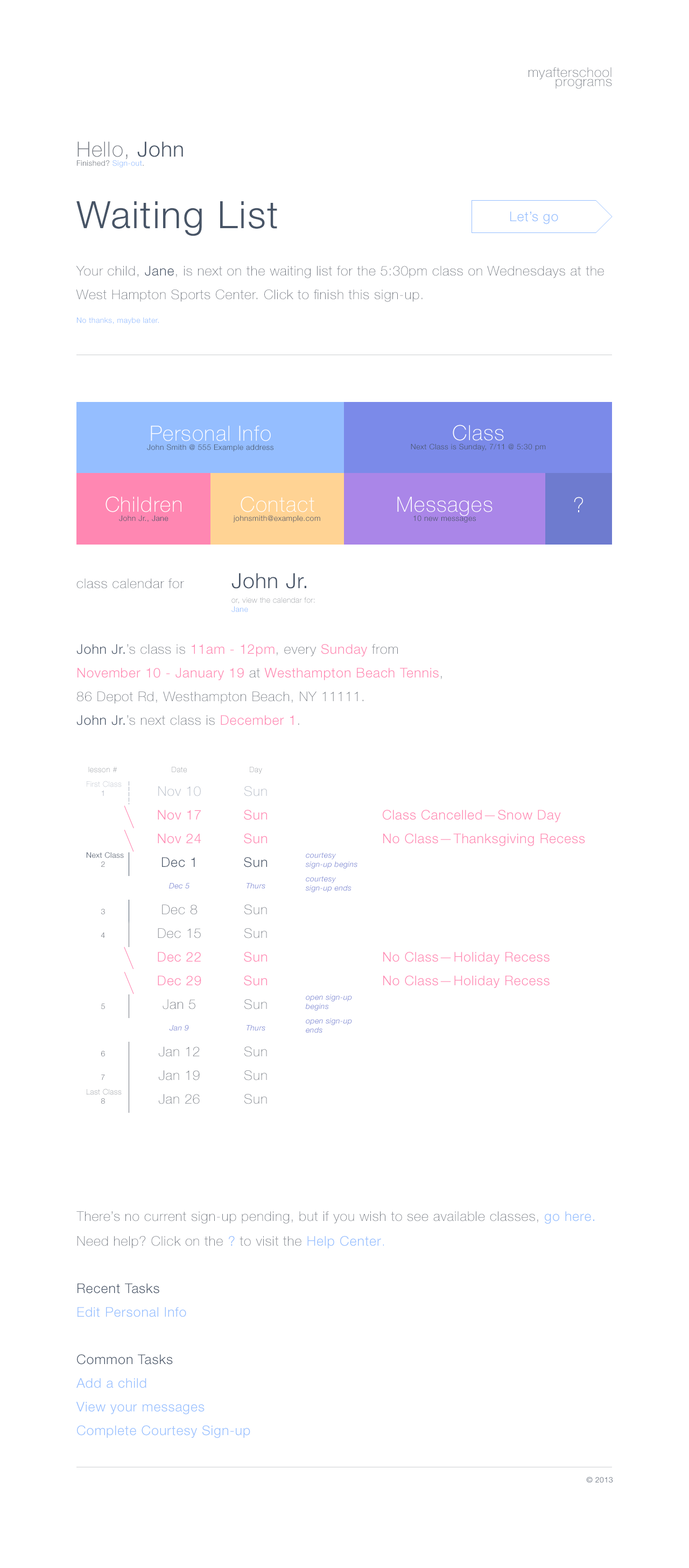
<style>
.page{position:relative;width:689px;height:1568px;background:#ffffff}
.page>*{position:absolute;margin:0}
.t1{font:13.5px/9.1px "HelveticaNeueLTStd-Th";letter-spacing:0.039em;color:#71767f}
.t2{font:7.5px/9.1px "HelveticaNeueLTStd-Lt";letter-spacing:0.039em;color:#71767f}
.t3{font:21px/9.1px "HelveticaNeueLTStd-Th";letter-spacing:0.039em;color:#71767f}
.t4{font:21px/9.1px "HelveticaNeueLTStd-Lt";letter-spacing:0.039em;color:#475466}
.t5{font:7.5px/9.1px "HelveticaNeueLTStd-Lt";letter-spacing:0.039em;color:#95beff}
.t6{font:13.5px/23.7px "HelveticaNeueLTStd-Th";letter-spacing:0.039em;color:#71767f}
.t7{font:37.7px/23.7px "HelveticaNeueLTStd-Lt";letter-spacing:0.039em;color:#475466}
.t8{font:13.5px/23.7px "HelveticaNeueLTStd-Lt";letter-spacing:0.039em;color:#475467}
.t9{font:7.5px/23.7px "HelveticaNeueLTStd-Lt";letter-spacing:0.039em;color:#95beff}
.t10{font:13.5px "HelveticaNeueLTStd-Lt";letter-spacing:0.039em;color:#95beff}
.t11{font:7.5px/9.1px "HelveticaNeueLTStd-Lt";letter-spacing:0.039em;color:#475467}
.t12{font:21px/23.7px "HelveticaNeueLTStd-Th";letter-spacing:0.039em;color:#ffffff}
.t13{font:21px/9.1px "HelveticaNeueLTStd-Th";letter-spacing:0.039em;color:#ffffff}
.t14{font:21px "HelveticaNeueLTStd-Th";letter-spacing:0.039em;color:#ffffff}
.t15{font:7.5px/9.1px "HelveticaNeueLTStd-Th";letter-spacing:0.039em;color:#71767f}
.t16{font:21px/23.7px "HelveticaNeueLTStd-Lt";letter-spacing:0.039em;color:#475467}
.t17{font:13.5px/23.7px "HelveticaNeueLTStd-Lt";letter-spacing:0.039em;color:#ff87b2}
.t18{font:7.5px "HelveticaNeueLTStd-Th";letter-spacing:0.039em}
.t19{font:7.5px/23.7px "HelveticaNeueLTStd-Lt";letter-spacing:0.039em;color:#71767f}
.t20{font:7.5px/23.7px "HelveticaNeueLTStd-Lt";letter-spacing:0.039em;color:#aab2bf}
.t21{font:13.5px "HelveticaNeueLTStd-Th";letter-spacing:0.039em;color:#aab2bf}
.t22{font:13.5px "HelveticaNeueLTStd-Lt";letter-spacing:0.039em;color:#ff87b2}
.t23{font:7.5px "HelveticaNeueLTStd-Lt";letter-spacing:0.039em;color:#475467}
.t24{font:13.5px "HelveticaNeueLTStd-Lt";letter-spacing:0.039em;color:#475467}
.t25{font:7.5px/9.1px "HelveticaNeueLTStd-LtIt";letter-spacing:0.039em;color:#6e7bcf}
.t26{font:7.5px "HelveticaNeueLTStd-LtIt";letter-spacing:0.039em;color:#6e7bcf}
.t27{font:13.5px "HelveticaNeueLTStd-Th";letter-spacing:0.039em;color:#71767f}
.t28{font:13.5px/23.7px "HelveticaNeueLTStd-Lt";letter-spacing:0.039em;color:#95beff}
.t29{font:13.5px/23.7px "HelveticaNeueLTStd-Th";letter-spacing:0.039em;color:#95beff}
</style>
<div class="page">
<p class="t1" style="left:528px;top:67px;width:84px;height:22px;text-align:right">myafterschool<br>programs</p>
<p class="t2" style="left:77px;top:142px;width:106px;height:25px"><span class="t3">Hello, </span><span class="t4">John<br></span>Finished? <span class="t5">Sign-out</span>.</p>
<p class="t6" style="left:76px;top:201px;width:528px;height:123px"><span class="t7">Waiting List<br><br></span>Your child, <span class="t8">Jane</span>, is next on the waiting list for the 5:30pm class on Wednesdays at the West Hampton Sports Center. Click to finish this sign-up.<br><span class="t9">No thanks, maybe later.</span></p>
<p class="t10" style="left:510px;top:211px;width:48px;height:13px">Let’s go</p>
<p class="t11" style="left:147px;top:426px;width:126px;height:25px;text-align:center"><span class="t12">Personal Info<br></span>John Smith @ 555 Example address</p>
<p class="t11" style="left:411px;top:425px;width:135px;height:26px;text-align:center"><span class="t13">Class<br></span>Next Class is Sunday, 7/11 @ 5:30 pm</p>
<p class="t11" style="left:105px;top:496px;width:76px;height:26px;text-align:center"><span class="t13">Children<br></span>John Jr., Jane</p>
<p class="t11" style="left:233px;top:496px;width:87px;height:26px;text-align:center"><span class="t13">Contact<br></span>johnsmith@example.com</p>
<p class="t11" style="left:397px;top:497px;width:95px;height:25px;text-align:center"><span class="t13">Messages<br></span>10 new messages</p>
<p class="t14" style="left:574px;top:497px;width:9px;height:15px">?</p>
<p class="t15" style="left:76px;top:573px;width:239px;height:39px"><span class="t6">class calendar for           </span><span class="t16">John Jr.<br><br></span>        or, view the calendar for:<br><span class="t5">        Jane</span></p>
<p class="t6" style="left:76px;top:644px;width:366px;height:81px"><span class="t8">John Jr.</span>’s class is <span class="t17">11am - 12pm</span>, every <span class="t17">Sunday</span> from <br><span class="t17">November 10 - January 19</span> at <span class="t17">Westhampton Beach Tennis</span>, 86 Depot Rd, Westhampton Beach, NY 11111.<br><span class="t8">John Jr.</span>’s next class is <span class="t17">December 1</span>.</p>
<p class="t18" style="left:88px;top:767px;width:29px;height:6px">lesson #</p>
<p class="t18" style="left:172px;top:767px;width:15px;height:6px">Date</p>
<p class="t18" style="left:250px;top:767px;width:12px;height:7px">Day</p>
<p class="t18" style="left:87px;top:781px;width:35px;height:6px">First Class</p>
<p class="t19" style="left:101px;top:790px;width:4px;height:314px;text-align:center"><span class="t20">1<br></span><br><br>2<br><br>3<br>4<br><br><br>5<br><br>6<br>7<br>8</p>
<p class="t21" style="left:158px;top:786px;width:43px;height:10px">Nov 10</p>
<p class="t21" style="left:244px;top:786px;width:23px;height:10px">Sun</p>
<p class="t22" style="left:158px;top:810px;width:43px;height:10px">Nov 17</p>
<p class="t22" style="left:244px;top:810px;width:23px;height:10px">Sun</p>
<p class="t22" style="left:383px;top:810px;width:178px;height:12px">Class Cancelled— Snow Day</p>
<p class="t22" style="left:158px;top:834px;width:43px;height:10px">Nov 24</p>
<p class="t22" style="left:244px;top:834px;width:23px;height:10px">Sun</p>
<p class="t22" style="left:383px;top:834px;width:202px;height:12px">No Class— Thanksgiving Recess</p>
<p class="t23" style="left:87px;top:852px;width:37px;height:6px">Next Class</p>
<p class="t24" style="left:162px;top:857px;width:33px;height:10px">Dec 1</p>
<p class="t24" style="left:244px;top:857px;width:23px;height:10px">Sun</p>
<p class="t25" style="left:306px;top:852px;width:51px;height:40px">courtesy sign-up begins<br><br>courtesy sign-up ends</p>
<p class="t26" style="left:169px;top:883px;width:20px;height:6px">Dec 5</p>
<p class="t26" style="left:246px;top:883px;width:19px;height:6px">Thurs</p>
<p class="t27" style="left:162px;top:905px;width:35px;height:10px">Dec 8</p>
<p class="t27" style="left:244px;top:905px;width:23px;height:10px">Sun</p>
<p class="t27" style="left:158px;top:928px;width:43px;height:10px">Dec 15</p>
<p class="t27" style="left:244px;top:928px;width:23px;height:10px">Sun</p>
<p class="t22" style="left:158px;top:952px;width:43px;height:10px">Dec 22</p>
<p class="t22" style="left:244px;top:952px;width:23px;height:10px">Sun</p>
<p class="t22" style="left:383px;top:952px;width:166px;height:12px">No Class— Holiday Recess</p>
<p class="t22" style="left:158px;top:976px;width:43px;height:10px">Dec 29</p>
<p class="t22" style="left:244px;top:976px;width:23px;height:10px">Sun</p>
<p class="t22" style="left:383px;top:976px;width:166px;height:12px">No Class— Holiday Recess</p>
<p class="t27" style="left:163px;top:999px;width:32px;height:10px">Jan 5</p>
<p class="t27" style="left:244px;top:999px;width:23px;height:10px">Sun</p>
<p class="t25" style="left:305px;top:994px;width:47px;height:39px">open sign-up<br>begins<br><br>open sign-up<br>ends</p>
<p class="t26" style="left:169px;top:1025px;width:20px;height:6px">Jan 9</p>
<p class="t26" style="left:246px;top:1025px;width:19px;height:6px">Thurs</p>
<p class="t27" style="left:159px;top:1047px;width:41px;height:10px">Jan 12</p>
<p class="t27" style="left:244px;top:1047px;width:23px;height:10px">Sun</p>
<p class="t27" style="left:159px;top:1070px;width:41px;height:10px">Jan 19</p>
<p class="t27" style="left:244px;top:1070px;width:23px;height:10px">Sun</p>
<p class="t18" style="left:87px;top:1089px;width:35px;height:6px">Last Class</p>
<p class="t27" style="left:159px;top:1094px;width:41px;height:10px">Jan 26</p>
<p class="t27" style="left:244px;top:1094px;width:23px;height:10px">Sun</p>
<p class="t27" style="left:76px;top:1211px;width:518px;height:13px">There’s no current sign-up pending, but if you wish to see available classes, <span class="t10">go here.</span></p>
<p class="t28" style="left:76px;top:1236px;width:308px;height:202px"><span class="t6">Need help? Click on the </span>? <span class="t6">to visit the </span>Help Center<span class="t29">.<br><br></span><span class="t8">Recent Tasks<br></span>Edit Personal Info<br><br><span class="t8">Common Tasks<br></span>Add a child<br>View your messages<br>Complete Courtesy Sign-up</p>
<p class="t23" style="left:586px;top:1477px;width:26px;height:6px">© 2013</p>
</div>
